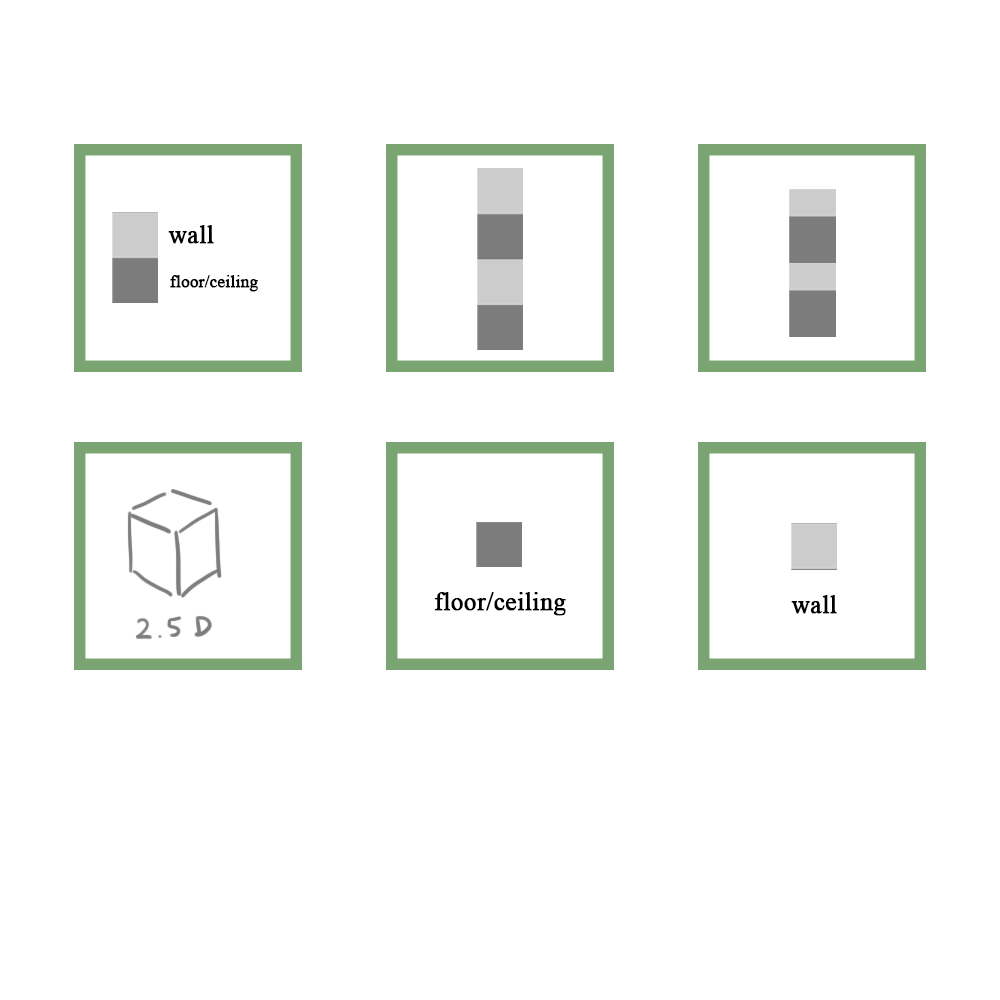
<style>
.page{position:relative;width:1000px;height:1000px;background:#ffffff}
.page>*{position:absolute;margin:0}
.t1{font:25px "TimesNewRomanPSMT";color:#000000;font-weight:bold}
.t2{font:16.7px "TimesNewRomanPSMT";color:#000000;font-weight:bold}
</style>
<div class="page">
<p class="t1" style="left:168px;top:225px;width:46px;height:19px">wall</p>
<p class="t2" style="left:170px;top:275px;width:88px;height:17px">floor/ceiling</p>
<p class="t1" style="left:435px;top:592px;width:131px;height:24px">floor/ceiling</p>
<p class="t1" style="left:791px;top:595px;width:46px;height:19px">wall</p>
</div>
